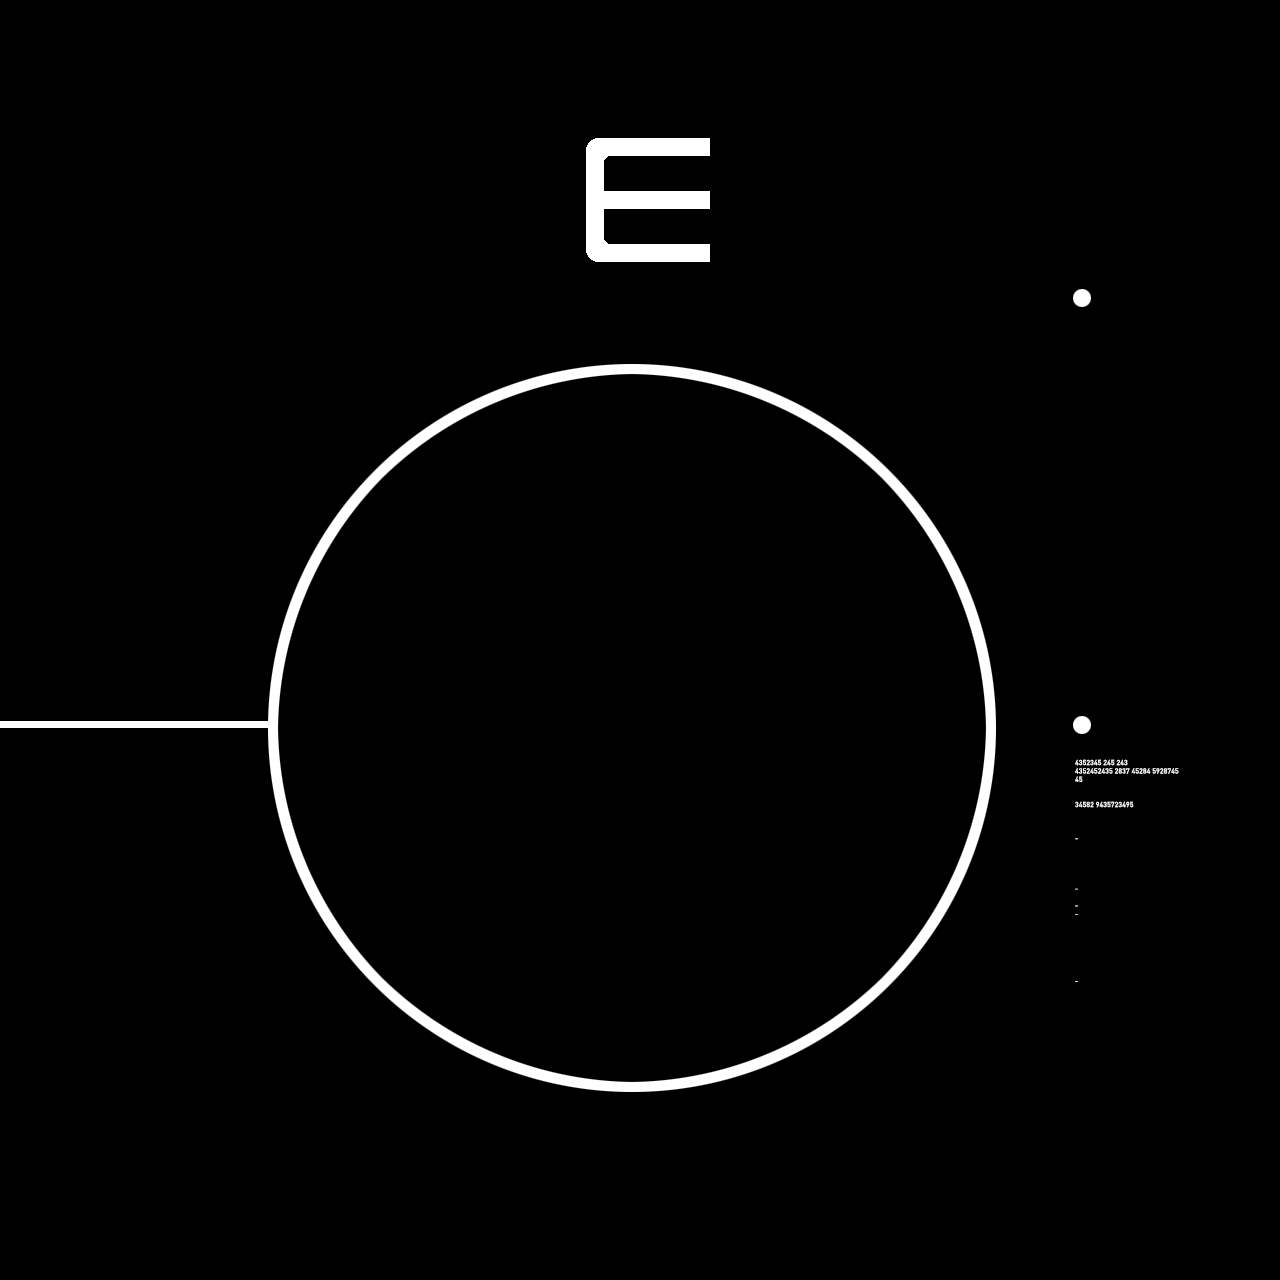
<style>
.page{position:relative;width:1280px;height:1280px;background:#000000}
.page>*{position:absolute;margin:0}
.t1{font:7px "DIN-Regular";letter-spacing:-0.01em;color:#ffffff;font-weight:bold}
</style>
<div class="page">
<p class="t1" style="left:1075px;top:759px;width:104px;height:223px">4352345 245 243<br>4352452435 2837 45284 5928745<br>45<br><br><br>34582 9435723495<br><br><br><br>-<br><br><br><br><br><br>-<br><br>-<br>-<br><br><br><br><br><br><br><br>-</p>
</div>
